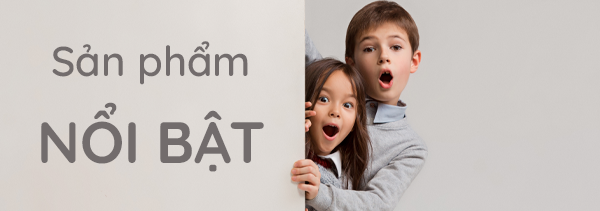
<style>
.page{position:relative;width:600px;height:211px}
.page>*{position:absolute;margin:0}
.t1{font:41.7px "Quicksand-SemiBold";color:#726c6c}
.t2{font:58.3px "Quicksand-Bold";color:#726c6c}
</style>
<div class="page">
<p class="t1" style="left:52px;top:41px;width:196px;height:44px">Sản phẩm</p>
<p class="t2" style="left:41px;top:102px;width:223px;height:70px">NỔI BẬT</p>
</div>
